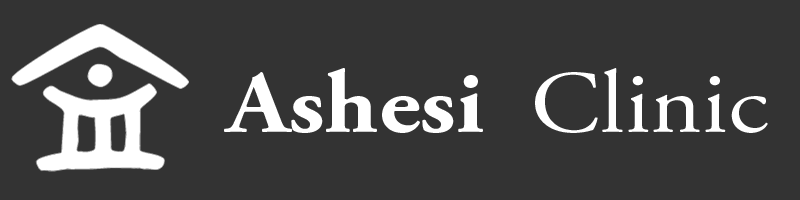
<style>
.page{position:relative;width:800px;height:200px;background:#333333}
.page>*{position:absolute;margin:0}
.t1{font:90px "AGaramondPro-Bold";color:#ffffff;scale:1.1 1}
.t2{font:90px "AGaramondPro-Regular";color:#ffffff;scale:1.1 1}
</style>
<div class="page">
<p class="t1" style="left:224px;top:68px;width:544px;height:65px">Ashesi  <span class="t2">Clinic</span></p>
</div>
